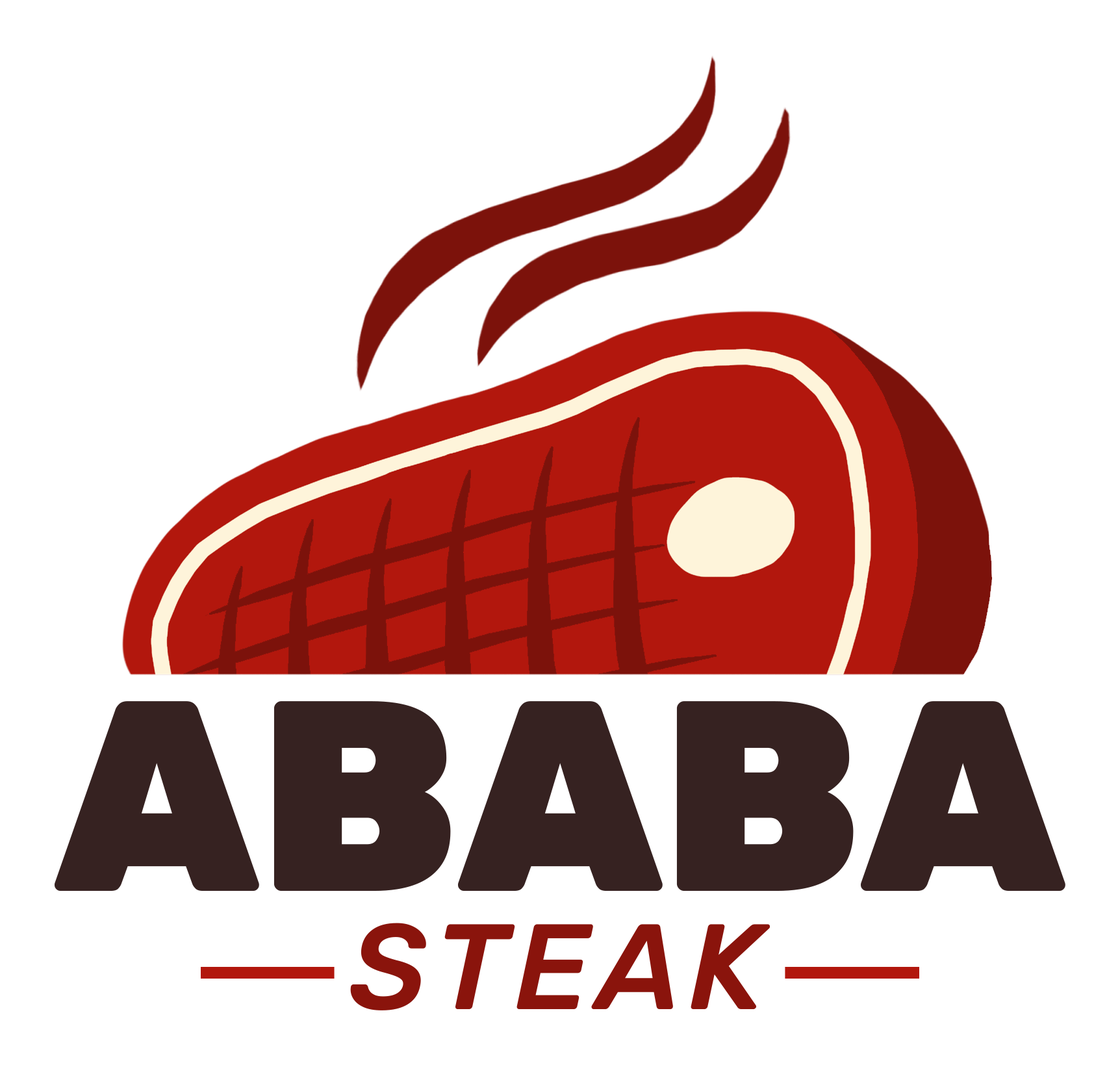
<style>
.page{position:relative;width:1120px;height:1065px;background:#ffffff}
.page>*{position:absolute;margin:0}
.t1{font:270.8px "RubikRoman-Black";color:#362221}
.t2{font:121.2px "RubikItalic-MediumItalic";letter-spacing:0.06em;color:#8a140c}
</style>
<div class="page">
<p class="t1" style="left:55px;top:701px;width:1010px;height:190px">ABABA</p>
<p class="t2" style="left:350px;top:922px;width:420px;height:88px">STEAK</p>
</div>
